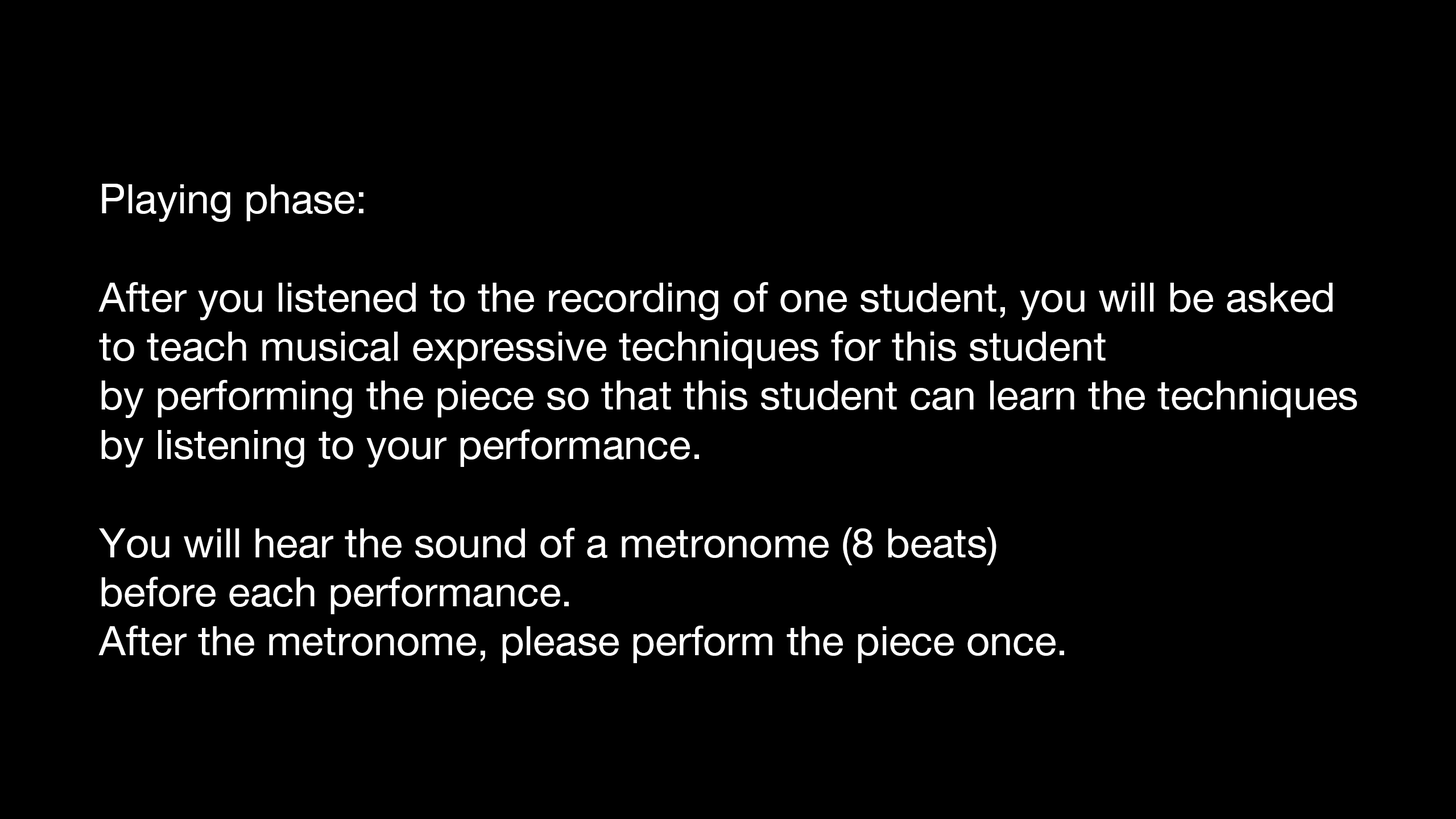
<style>
.page{position:relative;width:1456px;height:819px;background:#000000}
.page>*{position:absolute;margin:0}
.t1{font:40.9px "HelveticaNeue";color:#ffffff}
</style>
<div class="page">
<p class="t1" style="left:98px;top:184px;width:1259px;height:479px">Playing phase:<br><br>After you listened to the recording of one student, you will be asked<br>to teach musical expressive techniques for this student<br>by performing the piece so that this student can learn the techniques<br>by listening to your performance.<br><br>You will hear the sound of a metronome (8 beats) <br>before each performance. <br>After the metronome, please perform the piece once.</p>
</div>
